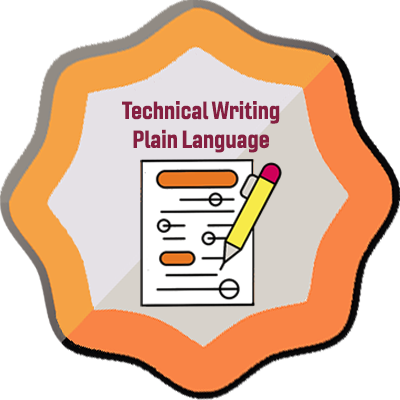
<style>
.page{position:relative;width:400px;height:400px;background:#ffffff}
.page>*{position:absolute;margin:0}
.t1{font:24px "Gineso-ConBol";color:#861f41}
</style>
<div class="page">
<p class="t1" style="left:122px;top:101px;width:158px;height:52px;text-align:center">Technical Writing<br>Plain Language</p>
</div>
